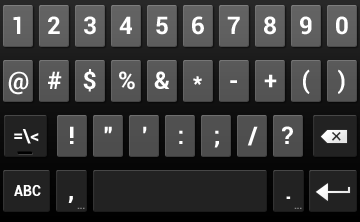
<style>
.page{position:relative;width:360px;height:222px}
.page>*{position:absolute;margin:0}
.t1{font:24px "Roboto-Bold";color:#ffffff}
.t2{font:18px "Roboto-Bold";color:#ffffff}
.t3{font:14px "Roboto-Bold";color:#ffffff}
.t4{font:10px "Roboto-Bold";letter-spacing:-0.025em;color:#848484}
</style>
<div class="page">
<p class="t1" style="left:13px;top:16px;width:8px;height:18px">1</p>
<p class="t1" style="left:48px;top:16px;width:12px;height:18px">2</p>
<p class="t1" style="left:84px;top:16px;width:12px;height:19px">3</p>
<p class="t1" style="left:119px;top:16px;width:13px;height:18px">4</p>
<p class="t1" style="left:156px;top:16px;width:12px;height:19px">5</p>
<p class="t1" style="left:192px;top:16px;width:12px;height:19px">6</p>
<p class="t1" style="left:227px;top:16px;width:13px;height:18px">7</p>
<p class="t1" style="left:264px;top:16px;width:12px;height:19px">8</p>
<p class="t1" style="left:300px;top:16px;width:12px;height:19px">9</p>
<p class="t1" style="left:336px;top:16px;width:12px;height:19px">0</p>
<p class="t1" style="left:8px;top:71px;width:21px;height:24px">@</p>
<p class="t1" style="left:48px;top:71px;width:14px;height:18px">#</p>
<p class="t1" style="left:83px;top:69px;width:13px;height:23px">$</p>
<p class="t1" style="left:119px;top:71px;width:16px;height:19px">%</p>
<p class="t1" style="left:154px;top:71px;width:16px;height:18px">&amp;</p>
<p class="t1" style="left:193px;top:76px;width:9px;height:9px">*</p>
<p class="t1" style="left:264px;top:74px;width:13px;height:14px">+</p>
<p class="t1" style="left:303px;top:69px;width:7px;height:25px">(</p>
<p class="t1" style="left:338px;top:69px;width:7px;height:25px">)</p>
<p class="t1" style="left:230px;top:80px;width:7px;height:3px">-</p>
<p class="t1" style="left:70px;top:126px;width:4px;height:18px">!</p>
<p class="t1" style="left:104px;top:126px;width:8px;height:8px">”</p>
<p class="t1" style="left:143px;top:126px;width:4px;height:8px">’</p>
<p class="t1" style="left:247px;top:126px;width:11px;height:20px">/</p>
<p class="t1" style="left:282px;top:126px;width:11px;height:18px">?</p>
<p class="t2" style="left:14px;top:129px;width:25px;height:15px">=\&lt;</p>
<p class="t1" style="left:179px;top:130px;width:4px;height:14px">:</p>
<p class="t1" style="left:214px;top:130px;width:5px;height:18px">;</p>
<p class="t3" style="left:14px;top:185px;width:27px;height:11px">ABC</p>
<p class="t1" style="left:68px;top:196px;width:5px;height:7px">,</p>
<p class="t1" style="left:286px;top:196px;width:5px;height:3px">.</p>
<p class="t4" style="left:77px;top:207px;width:8px;height:2px">...</p>
<p class="t4" style="left:294px;top:207px;width:8px;height:2px">...</p>
</div>
